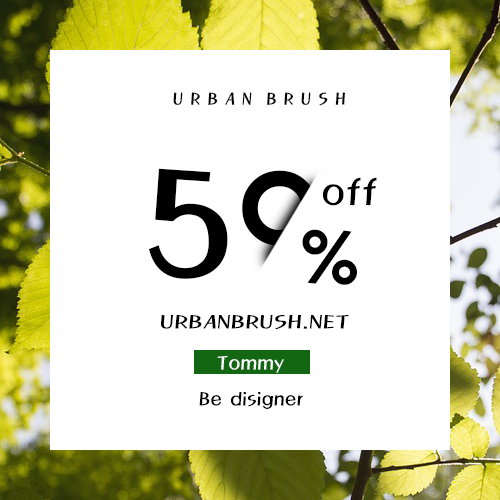
<style>
.page{position:relative;width:500px;height:500px;background:#ffffff}
.page>*{position:absolute;margin:0}
.t1{font:18px "MagicR-HM";color:#000000}
.t2{font:160px "MagicR-HM";letter-spacing:0.01em;color:#000000}
.t3{font:40px "MagicR-HM";letter-spacing:0.01em;color:#000000}
.t4{font:80px "MagicR-HM";letter-spacing:0.01em;color:#000000}
.t5{font:20px "MagicR-HM";letter-spacing:0.01em;color:#000000;scale:1.25 1}
.t6{font:20px "MagicR-HM";color:#fcfcfc}
.t7{font:20px "MagicR-HM";color:#000000}
</style>
<div class="page">
<p class="t1" style="left:173px;top:92px;width:173px;height:14px">U R B A N  B R U S H</p>
<p class="t2" style="left:149px;top:168px;width:169px;height:111px">50</p>
<p class="t3" style="left:322px;top:177px;width:55px;height:29px">off</p>
<p class="t4" style="left:302px;top:229px;width:55px;height:56px">%</p>
<p class="t5" style="left:161px;top:315px;width:188px;height:15px">URBANBRUSH.NET</p>
<p class="t6" style="left:217px;top:356px;width:67px;height:17px">Tommy</p>
<p class="t7" style="left:199px;top:391px;width:104px;height:18px">Be disigner</p>
</div>
